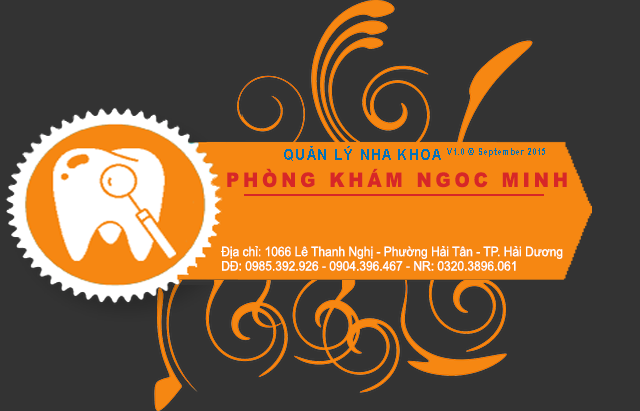
<style>
.page{position:relative;width:640px;height:411px;background:#333333}
.page>*{position:absolute;margin:0}
.t1{font:15.3px "Arial-BoldMT";letter-spacing:0.1em;color:#0072bc;scale:0.91 1}
.t2{font:19.8px "Arial-Black";letter-spacing:0.215em;color:#d72727;scale:0.92 1}
.t3{font:13.2px "ArialMT";color:#ffffff;scale:0.91 1}
</style>
<div class="page">
<p class="t1" style="left:284px;top:146px;width:261px;height:15px">QUẢN LÝ NHA KHOA V1.0 © September 2015</p>
<p class="t2" style="left:227px;top:168px;width:340px;height:20px">PHÒNG KHÁM NGOC MINH</p>
<p class="t3" style="left:221px;top:246px;width:342px;height:25px">Địa chỉ: 1066 Lê Thanh Nghị - Phường Hải Tân - TP. Hải Dương<br>DĐ: 0985.392.926 - 0904.396.467 - NR: 0320.3896.061</p>
</div>
